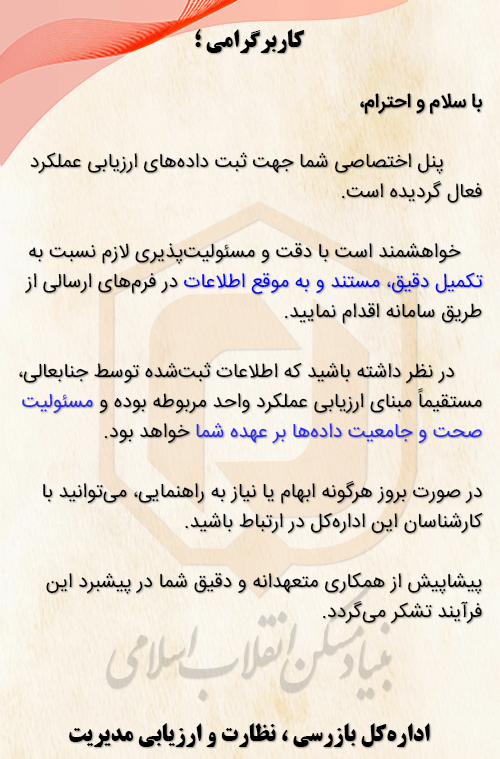
<style>
.page{position:relative;width:500px;height:759px}
.page>*{position:absolute;margin:0}
.t1{font:20px/30px "IRANSans";color:#000000}
.t2{font:24px/30px "BTitrBold";color:#000000}
.t3{font:20px/30px "IRANSans-Bold";color:#000000}
.t4{font:20px/30px "IRANSans";color:#0006ee}
.t5{font:20px/30px "IRANSans";color:#2529ed}
.t6{font:24px/32px "BTitrBold";color:#000000}
</style>
<div class="page">
<p class="t1" style="left:19px;top:29px;width:464px;height:718px;text-align:center"><span class="t2">کاربرگرامی ؛<br><br></span><span class="t3">با سلام و احترام،<br></span><br>       پنل اختصاصی شما جهت ثبت داده‌های ارزیابی عملکرد فعال گردیده است.<br><br>    خواهشمند است با دقت و مسئولیت‌پذیری لازم نسبت به <span class="t4">تکمیل دقیق، مستند و به موقع اطلاعات</span> در فرم‌های ارسالی از طریق سامانه اقدام نمایید.<br><br>     در نظر داشته باشید که اطلاعات ثبت‌شده توسط جنابعالی، مستقیماً مبنای ارزیابی عملکرد واحد مربوطه بوده و <span class="t5">مسئولیت صحت و جامعیت داده‌ها بر عهده شما</span> خواهد بود.<br><br>در صورت بروز هرگونه ابهام یا نیاز به راهنمایی، می‌توانید با کارشناسان این اداره‌کل در ارتباط باشید.<br><br>پیشاپیش از همکاری متعهدانه و دقیق شما در پیشبرد این فرآیند تشکر می‌گردد.<br><br><br><br><span class="t6">اداره‌کل بازرسی ، نظارت و ارزیابی مدیریت</span></p>
</div>
